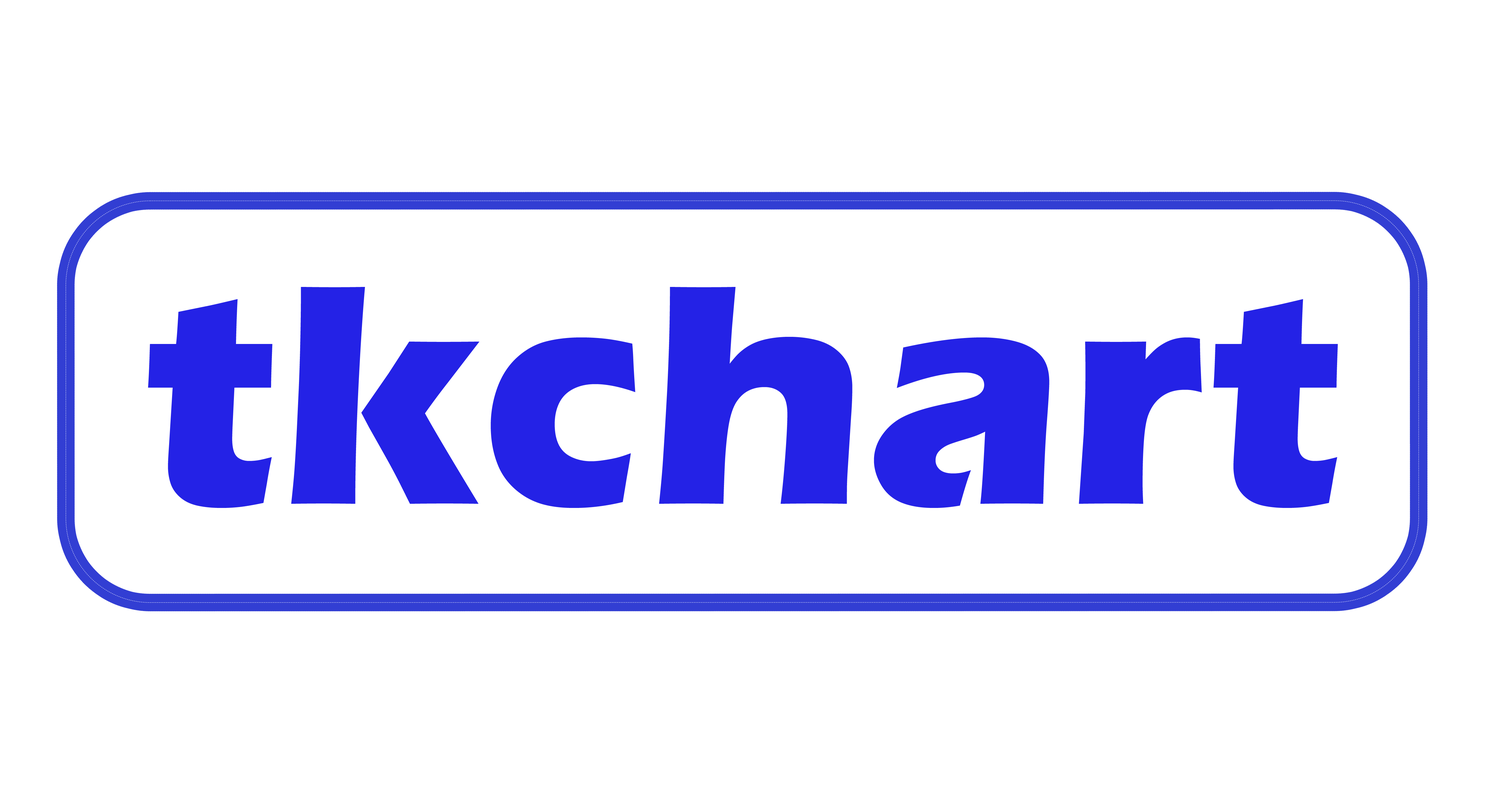
<style>
.page{position:relative;width:1486px;height:802px;background:#ffffff}
.page>*{position:absolute;margin:0}
.t1{font:325.7px "ErasITC-Bold";color:#201aec}
</style>
<div class="page">
<p class="t1" style="left:148px;top:287px;width:1190px;height:221px">tkchart</p>
</div>
